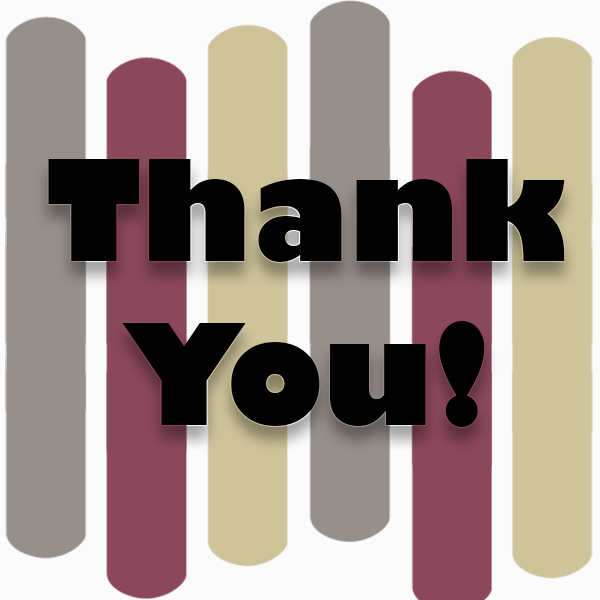
<style>
.page{position:relative;width:600px;height:600px;background:#fbfbfb}
.page>*{position:absolute;margin:0}
.t1{font:137px "GillSans-UltraBold";color:#000000}
</style>
<div class="page">
<p class="t1" style="left:48px;top:159px;width:517px;height:268px;text-align:center">Thank You!</p>
</div>
